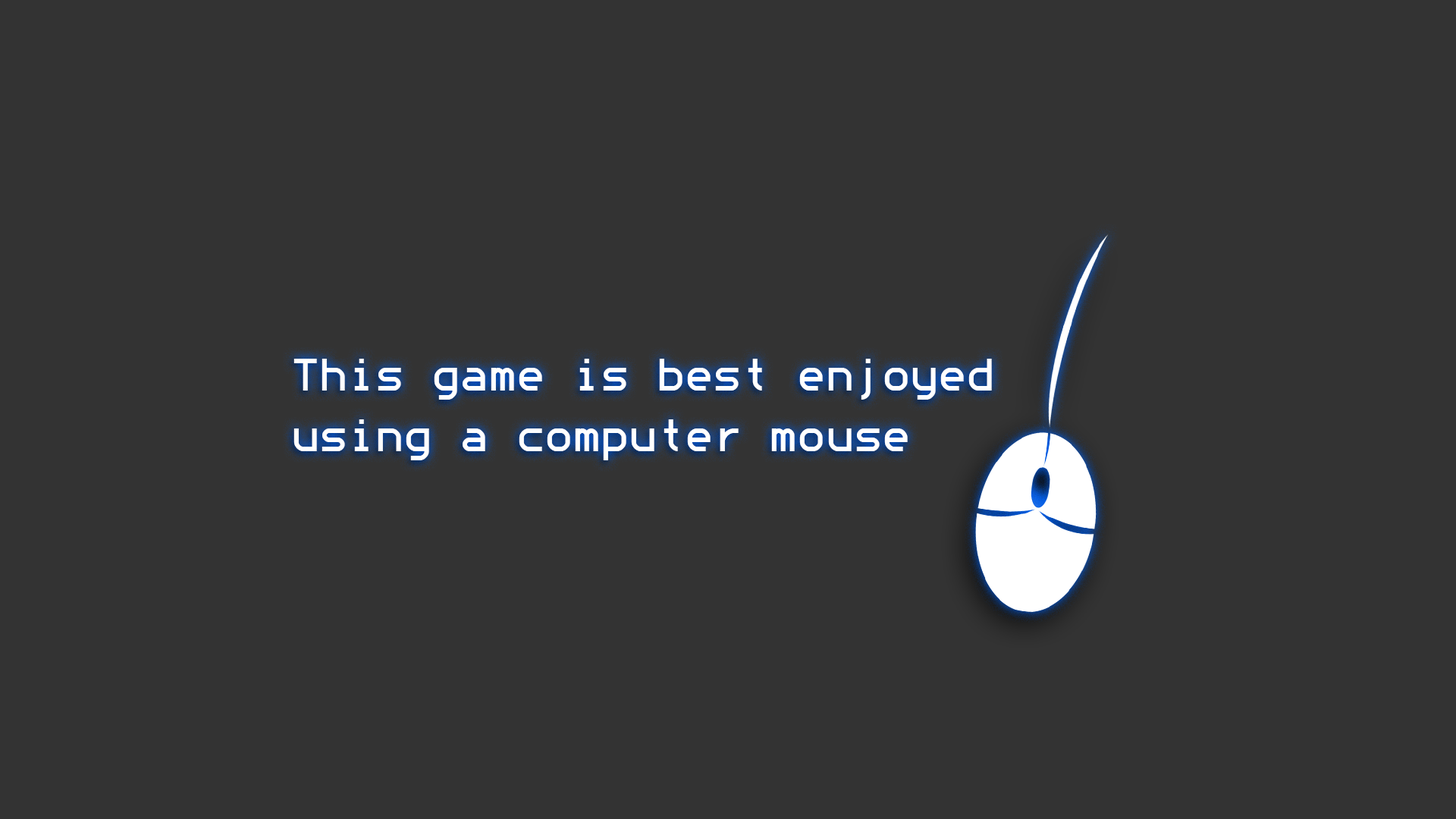
<style>
.page{position:relative;width:1456px;height:819px;background:#333333}
.page>*{position:absolute;margin:0}
.t1{font:45.5px "ModeNine";letter-spacing:0.025em;color:#ffffff}
</style>
<div class="page">
<p class="t1" style="left:293px;top:359px;width:699px;height:101px">This game is best enjoyed <br>using a computer mouse</p>
</div>
